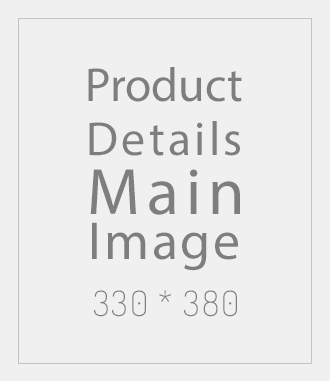
<style>
.page{position:relative;width:330px;height:381px;background:#f0f0f0}
.page>*{position:absolute;margin:0}
.t1{font:47.9px "MyriadPro-Regular";color:#7e7e7e}
.t2{font:47.9px "MyriadPro-Regular";letter-spacing:0.07em;color:#7e7e7e}
.t3{font:65.9px "MyriadPro-Regular";letter-spacing:0.1em;color:#7e7e7e}
.t4{font:53.9px "MyriadPro-Regular";letter-spacing:0.05em;color:#7e7e7e}
.t5{font:35px "Dosis-ExtraLight";letter-spacing:0.05em;color:#7e7e7e}
</style>
<div class="page">
<p class="t1" style="left:88px;top:67px;width:154px;height:35px">Product</p>
<p class="t2" style="left:89px;top:121px;width:151px;height:35px">Details</p>
<p class="t3" style="left:90px;top:169px;width:150px;height:46px">Main</p>
<p class="t4" style="left:92px;top:222px;width:146px;height:49px">Image</p>
<p class="t5" style="left:94px;top:290px;width:143px;height:27px">330 * 380</p>
</div>
